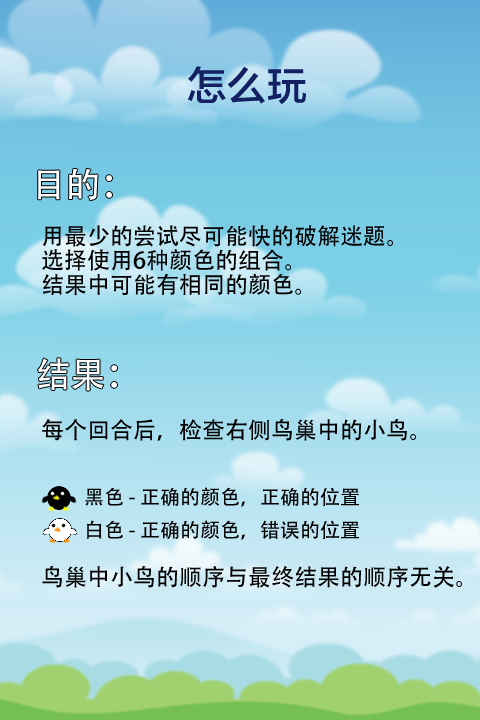
<style>
.page{position:relative;width:480px;height:720px}
.page>*{position:absolute;margin:0}
.t1{font:40px "FZLTZHK--GBK1-0";color:#132062}
.t2{font:35px "AdobeHeitiStd-Regular";color:#ffffff}
.t3{font:23px/24.3px "AdobeHeitiStd-Regular";color:#010101}
.t4{font:23px "AdobeHeitiStd-Regular";color:#010101}
.t5{font:20px "AdobeHeitiStd-Regular";color:#010101}
</style>
<div class="page">
<p class="t1" style="left:187px;top:66px;width:119px;height:38px">怎么玩</p>
<p class="t2" style="left:38px;top:168px;width:74px;height:32px">目的：</p>
<p class="t3" style="left:42px;top:225px;width:351px;height:70px">用最少的尝试尽可能快的破解迷题。<br>选择使用6种颜色的组合。<br>结果中可能有相同的颜色。</p>
<p class="t2" style="left:38px;top:358px;width:79px;height:33px">结果：</p>
<p class="t4" style="left:42px;top:419px;width:374px;height:22px">每个回合后，检查右侧鸟巢中的小鸟。</p>
<p class="t5" style="left:85px;top:487px;width:274px;height:20px">黑色 - 正确的颜色，正确的位置</p>
<p class="t5" style="left:87px;top:520px;width:272px;height:20px">白色 - 正确的颜色，错误的位置</p>
<p class="t4" style="left:42px;top:566px;width:420px;height:22px">鸟巢中小鸟的顺序与最终结果的顺序无关。</p>
</div>
